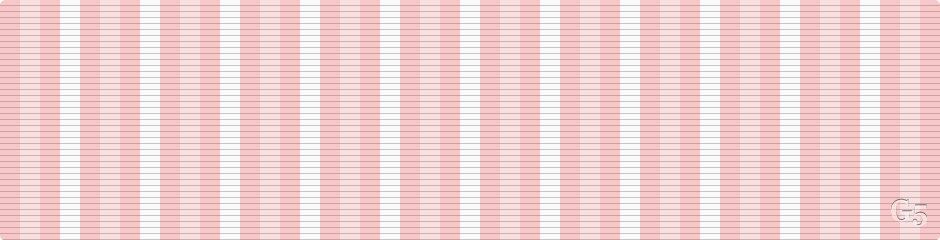
<style>
.page{position:relative;width:940px;height:240px;background:#f7c8c9}
.page>*{position:absolute;margin:0}
.t1{font:30px "Georgia-Bold";color:#f9e1e2;scale:0.9 1}
</style>
<div class="page">
<p class="t1" style="left:891px;top:199px;width:36px;height:28px">G5</p>
</div>
